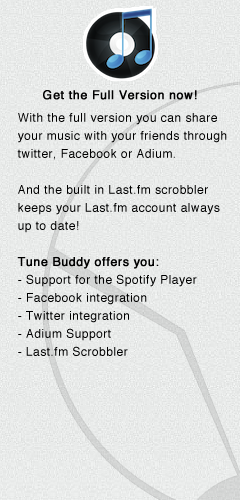
<style>
.page{position:relative;width:240px;height:500px}
.page>*{position:absolute;margin:0}
.t1{font:12px "Helvetica";letter-spacing:0.04em;color:#000000;font-weight:bold}
.t2{font:12px/18px "Helvetica";letter-spacing:0.04em;color:#000000}
.t3{font:12px/18px "Helvetica";letter-spacing:0.04em;color:#000000;font-weight:bold}
</style>
<div class="page">
<p class="t1" style="left:43px;top:90px;width:154px;height:10px">Get the Full Version now!</p>
<p class="t2" style="left:17px;top:113px;width:210px;height:243px">With the full version you can share<br>your music with your friends through<br>twitter, Facebook or Adium.<br><br>And the built in Last.fm scrobbler<br>keeps your Last.fm account always<br>up to date!<br><br><span class="t3">Tune Buddy offers you:<br></span>- Support for the Spotify Player<br>- Facebook integration<br>- Twitter integration<br>- Adium Support<br>- Last.fm Scrobbler</p>
</div>
